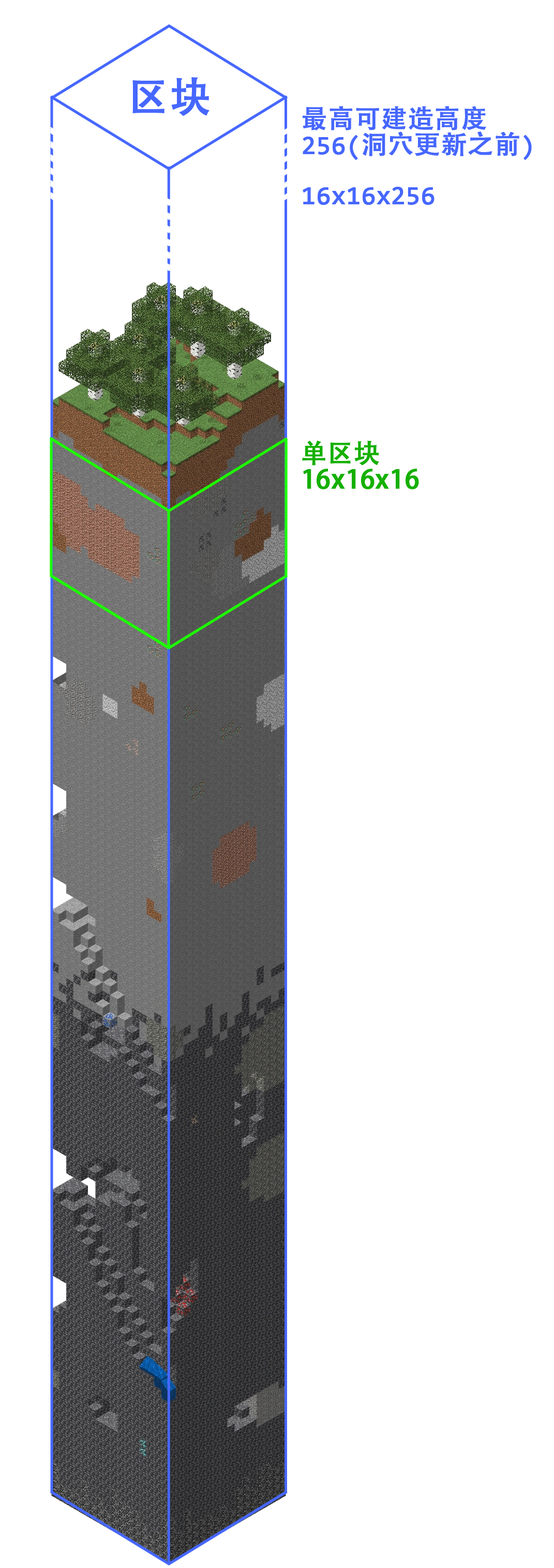
<style>
.page{position:relative;width:554px;height:1568px;background:#ffffff}
.page>*{position:absolute;margin:0}
.t1{font:41px "AdobeHeitiStd-Regular";color:#4667ff;font-weight:bold}
.t2{font:25.9px/25.9px "Consolas";color:#4667ff;font-weight:bold}
.t3{font:25.9px/25.9px "AdobeHeitiStd-Regular";color:#4667ff;font-weight:bold}
.t4{font:6.2px/25.9px "AdobeHeitiStd-Regular";color:#15b000;font-weight:bold}
</style>
<div class="page">
<p class="t1" style="left:132px;top:77px;width:78px;height:39px">区块</p>
<p class="t2" style="left:303px;top:106px;width:229px;height:99px"><span class="t3">最高可建造高度<br></span>256(<span class="t3">洞穴更新之前</span>)<br><br>16x16x256</p>
<p class="t4" style="left:302px;top:441px;width:117px;height:48px">单区块<br>16x16x16</p>
</div>
